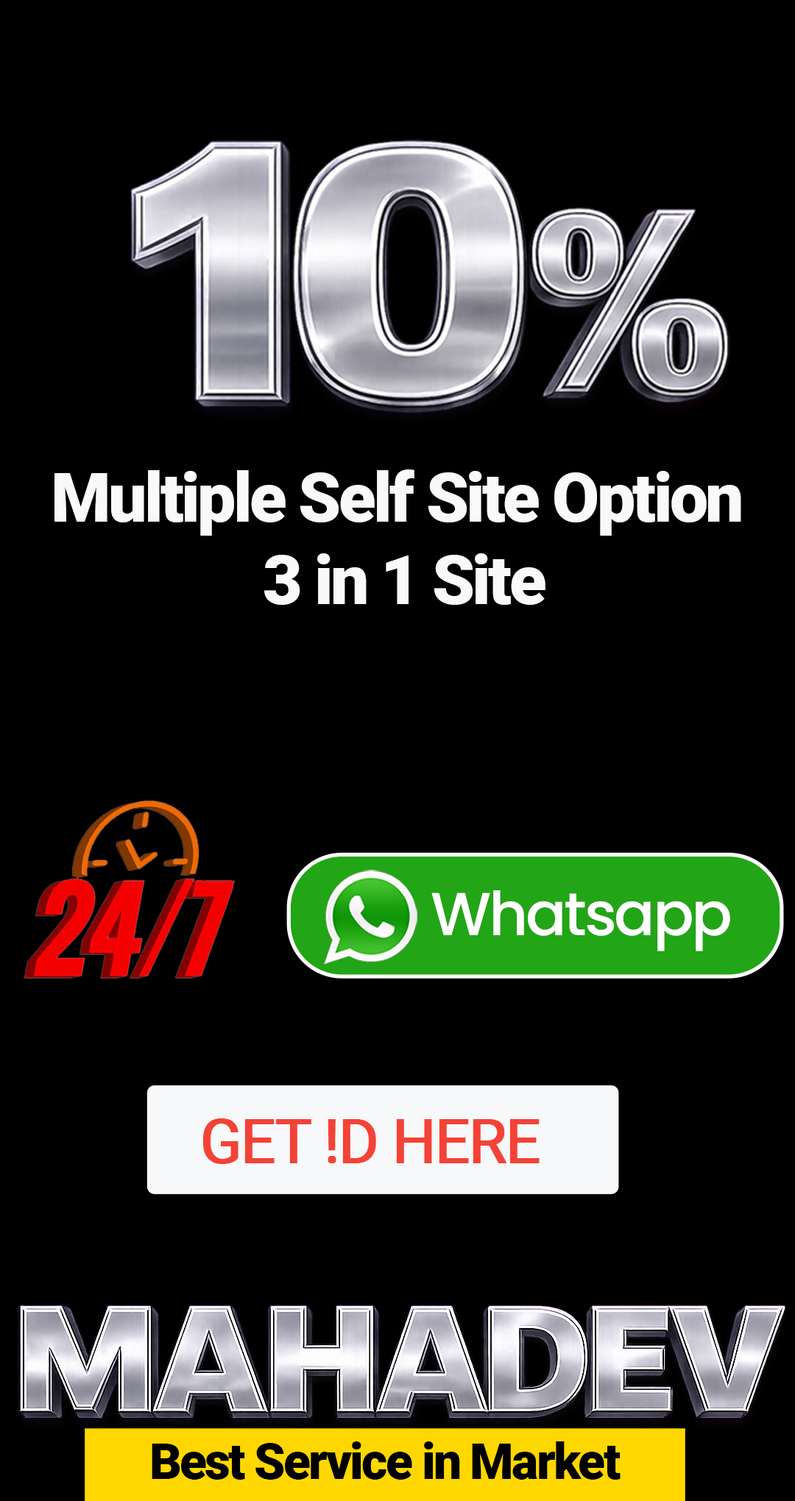
<style>
.page{position:relative;width:795px;height:1501px;background:#000000}
.page>*{position:absolute;margin:0}
.t1{font:68.6px "Roboto-Black";letter-spacing:-0.04em;color:#f9f9f9}
.t2{font:60.5px "Poppins-Medium";letter-spacing:-0.04em;color:#ffffff}
.t3{font:60.9px "Roboto-Regular";letter-spacing:-0.04em;color:#f44236;text-transform:uppercase;font-weight:bold}
.t4{font:50px "Roboto-Black";letter-spacing:-0.04em;color:#000000}
</style>
<div class="page">
<p class="t1" style="left:54px;top:469px;width:687px;height:136px;text-align:center">Multiple Self Site Option<br> 3 in 1 Site</p>
<p class="t2" style="left:431px;top:890px;width:299px;height:61px">Whatsapp</p>
<p class="t3" style="left:202px;top:1118px;width:337px;height:46px">GET !D HERE</p>
<p class="t4" style="left:152px;top:1441px;width:468px;height:38px">Best Service in Market</p>
</div>
